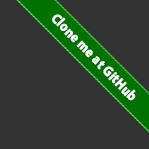
<style>
.page{position:relative;width:149px;height:149px;background:#333333}
.page>*{position:absolute;margin:0}
.t1{font:14px "MyriadHebrew-Bold";letter-spacing:0.005em;color:#ffffff;font-weight:bold;scale:0.9 1}
</style>
<div class="page">
<p class="t1" style="left:52px;top:14px;width:84px;height:87px;rotate:46deg">Clone me at GitHub</p>
</div>
